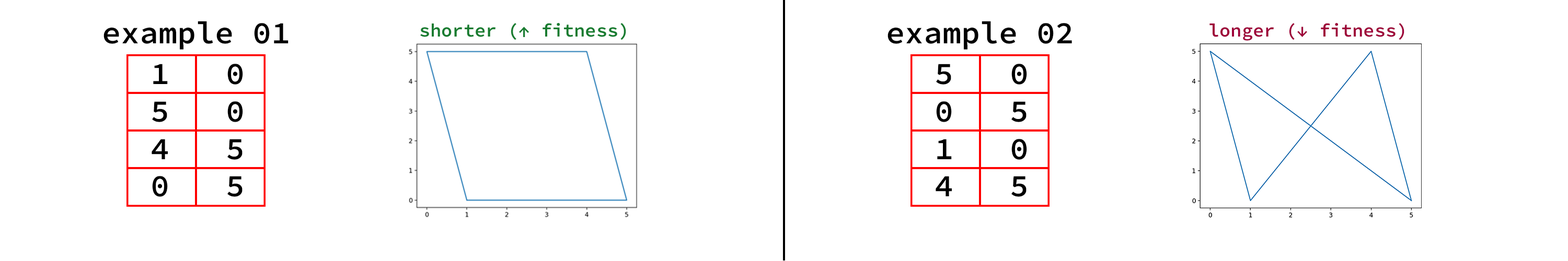
<style>
.page{position:relative;width:1568px;height:261px;background:#ffffff}
.page>*{position:absolute;margin:0}
.t1{font:31.3px "SourceCodeRoman-Semibold";color:#000000}
.t2{font:18.4px "SourceCodeRoman-Semibold";color:#197b30}
.t3{font:18.4px "SourceCodeRoman-Semibold";color:#9e0039}
</style>
<div class="page">
<p class="t1" style="left:103px;top:21px;width:186px;height:29px">example 01</p>
<p class="t2" style="left:420px;top:23px;width:206px;height:17px">shorter (↑ fitness)</p>
<p class="t1" style="left:887px;top:21px;width:185px;height:29px">example 02</p>
<p class="t3" style="left:1209px;top:23px;width:195px;height:18px">longer (↓ fitness)</p>
<p class="t1" style="left:152px;top:64px;width:91px;height:133px;text-align:center">1   0<br>5   0<br>4   5<br>0   5</p>
<p class="t1" style="left:936px;top:64px;width:91px;height:133px;text-align:center">5   0<br>0   5<br>1   0<br>4   5</p>
</div>
